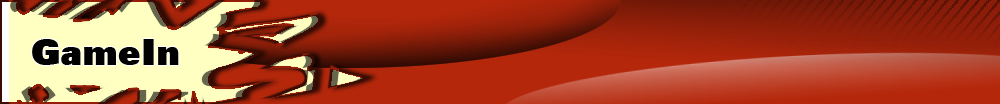
<style>
.page{position:relative;width:1000px;height:104px}
.page>*{position:absolute;margin:0}
.t1{font:36px "ZurichBT-ExtraBlack";color:#010101}
</style>
<div class="page">
<p class="t1" style="left:32px;top:39px;width:147px;height:26px">GameIn</p>
</div>
